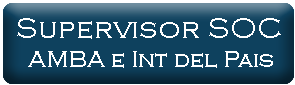
<style>
.page{position:relative;width:295px;height:85px;background:#0e415e}
.page>*{position:absolute;margin:0}
.t1{font:24px "CopperplateGothic-Light";color:#ffffff}
.t2{font:30px "CopperplateGothic-Light";color:#ffffff}
</style>
<div class="page">
<p class="t1" style="left:17px;top:18px;width:264px;height:50px;text-align:center"><span class="t2">Supervisor SOC<br> </span>AMBA e Int del Pais</p>
</div>
